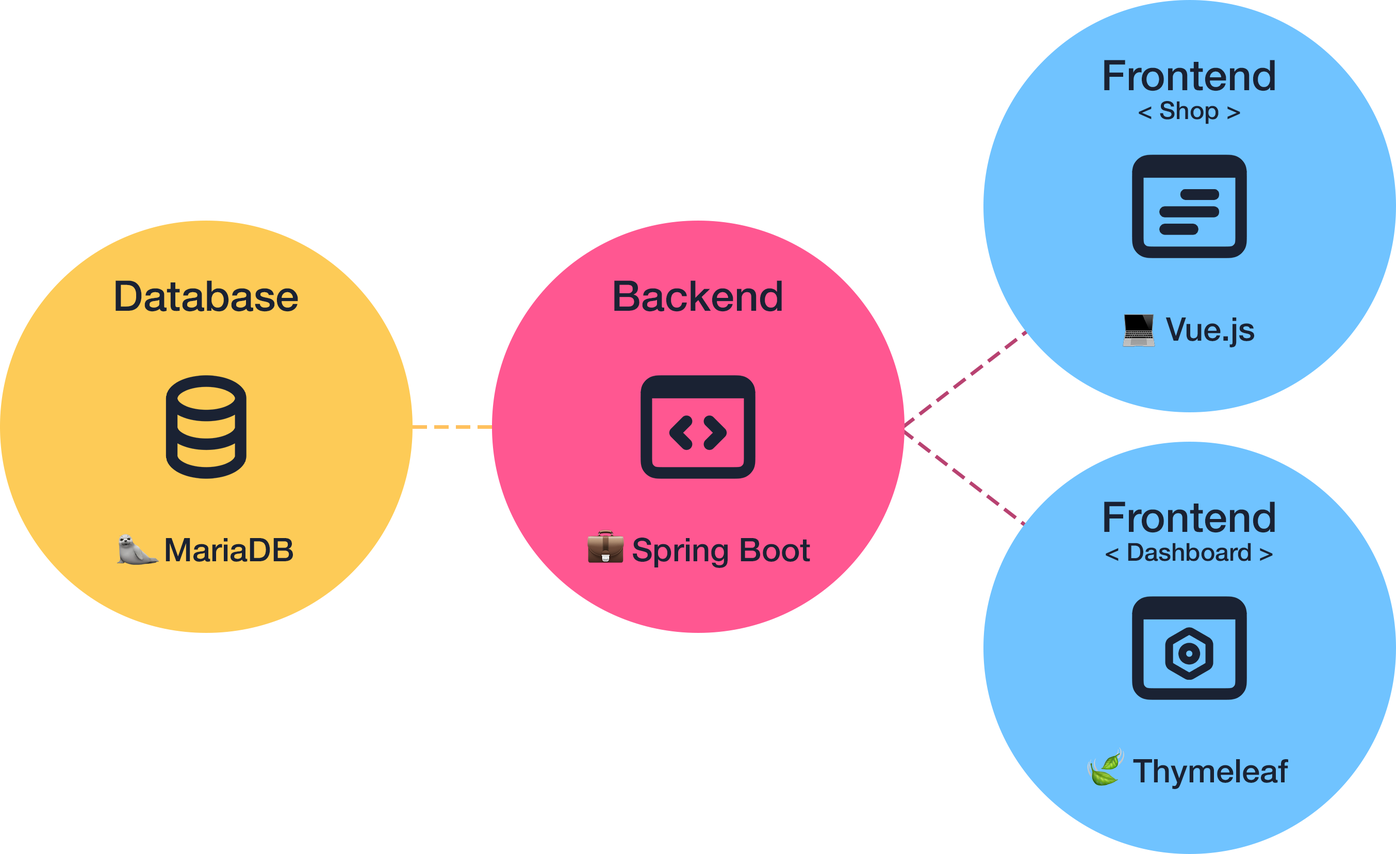
<style>
.page{position:relative;width:1396px;height:854px;background:#ffffff}
.page>*{position:absolute;margin:0}
.t1{font:42.3px "Karlo'sVideoArchivesFont";color:#1a2233}
.t2{font:24.7px "Karlo'sVideoArchivesFont";color:#1a2233}
.t3{font:32.5px "Karlo'sVideoArchivesFont";color:#1a2233}
</style>
<div class="page">
<p class="t1" style="left:1104px;top:60px;width:171px;height:31px">Frontend</p>
<p class="t2" style="left:1138px;top:101px;width:102px;height:23px">&lt; Shop &gt;</p>
<p class="t1" style="left:115px;top:280px;width:183px;height:32px">Database</p>
<p class="t1" style="left:614px;top:280px;width:168px;height:32px">Backend</p>
<p class="t3" style="left:1165px;top:318px;width:89px;height:30px">Vue.js</p>
<p class="t1" style="left:1104px;top:502px;width:171px;height:31px">Frontend</p>
<p class="t3" style="left:166px;top:538px;width:127px;height:24px">MariaDB</p>
<p class="t3" style="left:633px;top:538px;width:177px;height:30px">Spring Boot</p>
<p class="t2" style="left:1105px;top:543px;width:167px;height:18px">&lt; Dashboard &gt;</p>
<p class="t3" style="left:1133px;top:759px;width:155px;height:30px">Thymeleaf</p>
</div>
